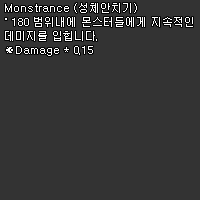
<style>
.page{position:relative;width:200px;height:200px;background:#333333}
.page>*{position:absolute;margin:0}
.t1{font:11px/14px "Dotum";color:#ffffff}
</style>
<div class="page">
<p class="t1" style="left:5px;top:3px;width:188px;height:53px">Monstrance (성체안치기)<br>˚ 180 범위내에 몬스터들에게 지속적인<br>데미지를 입힙니다.<br>※Damage * 0.15</p>
</div>
